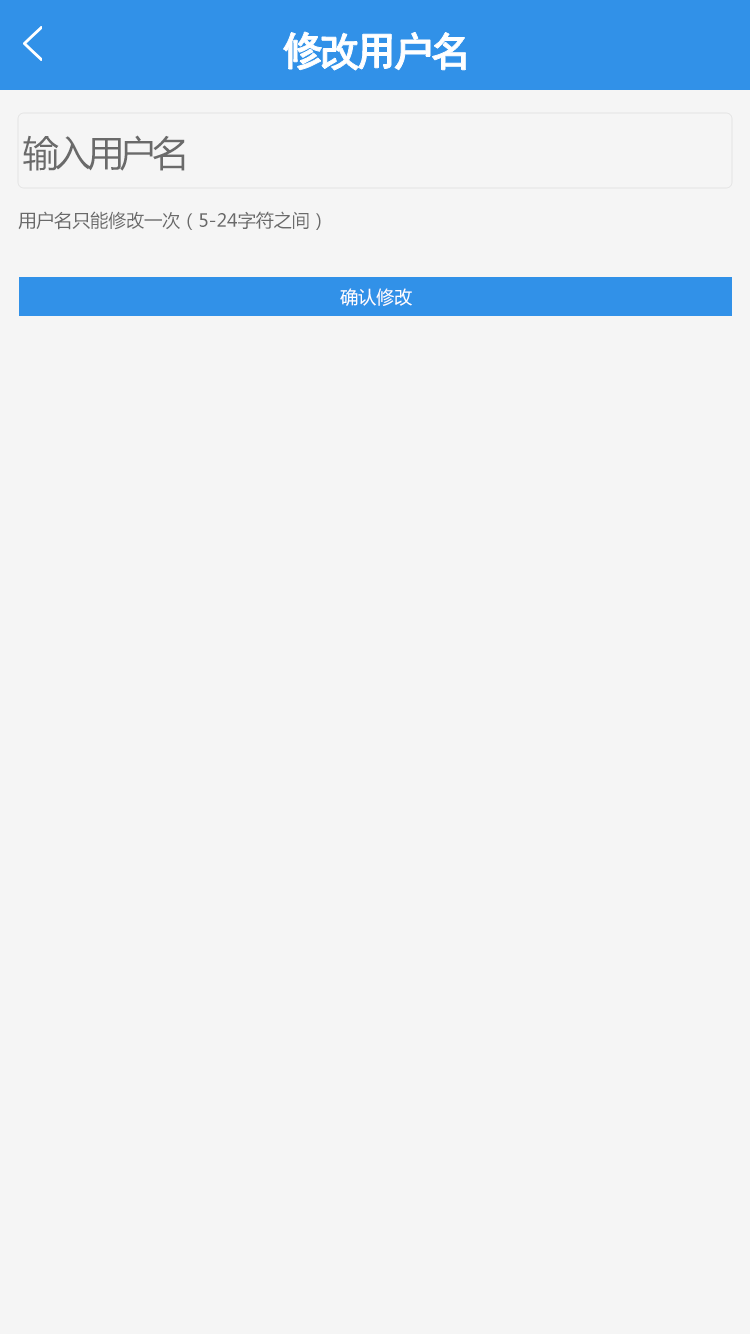
<style>
.page{position:relative;width:750px;height:1334px;background:#f5f5f5}
.page>*{position:absolute;margin:0}
.t1{font:40px "SimHei";letter-spacing:-0.1em;color:#ffffff;font-weight:bold}
.t2{font:36px "MicrosoftYaHei";letter-spacing:-0.1em;color:#6a6a6a}
.t3{font:18px "MicrosoftYaHei";color:#6a6a6a}
.t4{font:18px "MicrosoftYaHei";color:#fefefe}
</style>
<div class="page">
<p class="t1" style="left:283px;top:32px;width:183px;height:38px">修改用户名</p>
<p class="t2" style="left:23px;top:135px;width:162px;height:36px">输入用户名</p>
<p class="t3" style="left:18px;top:211px;width:303px;height:19px">用户名只能修改一次（5-24字符之间）</p>
<p class="t4" style="left:340px;top:288px;width:72px;height:18px">确认修改</p>
</div>
